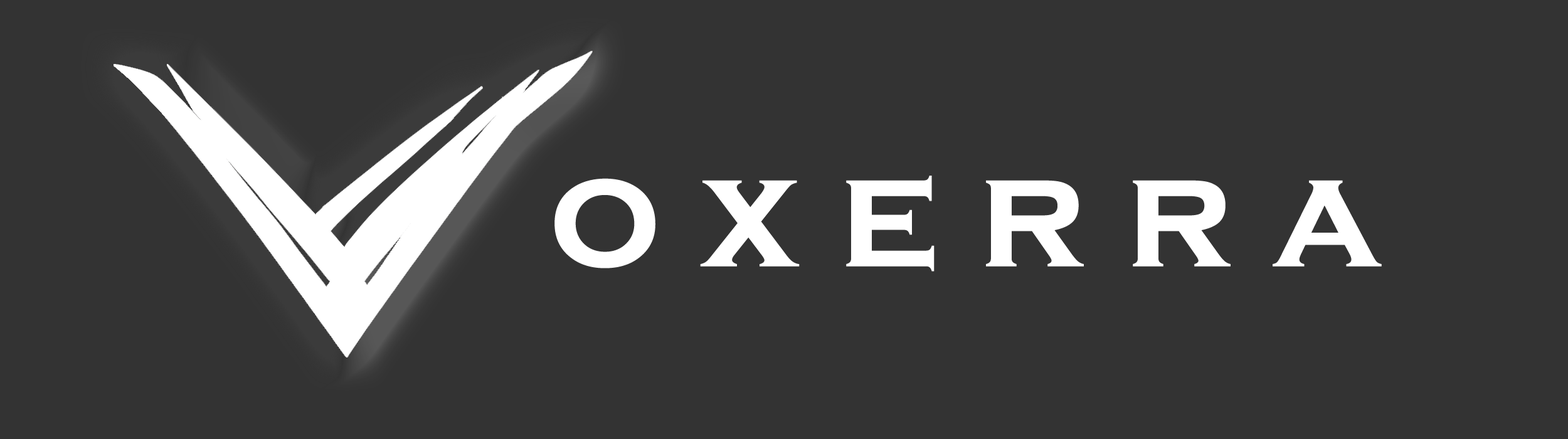
<style>
.page{position:relative;width:1568px;height:439px;background:#333333}
.page>*{position:absolute;margin:0}
.t1{font:156.8px "CopperplateGothic-Bold";letter-spacing:0.25em;color:#ffffff}
</style>
<div class="page">
<p class="t1" style="left:554px;top:176px;width:828px;height:96px">oxerra</p>
</div>
